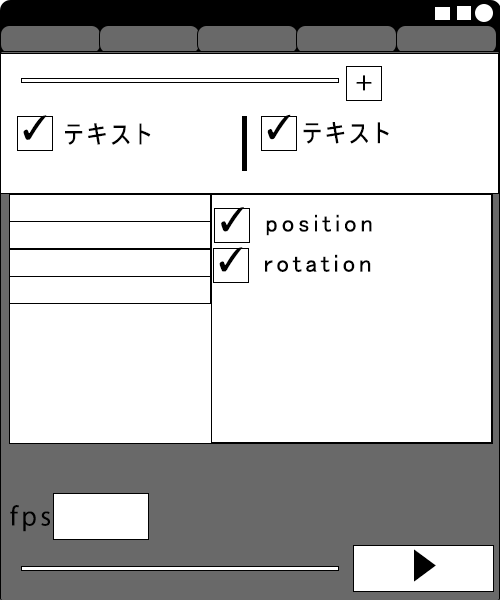
<style>
.page{position:relative;width:500px;height:600px;background:#ffffff}
.page>*{position:absolute;margin:0}
.t1{font:25px "MyriadPro-Regular";letter-spacing:0.15em;color:#000000}
.t2{font:33.3px "MS-UIGothic";letter-spacing:0.15em;color:#000000}
.t3{font:25px "MS-UIGothic";letter-spacing:0.15em;color:#000000}
.t4{font:33.1px "MS-UIGothic";letter-spacing:0.15em;color:#000000}
.t5{font:33.3px "KozGoPr6N-Regular";letter-spacing:0.15em;color:#000000}
</style>
<div class="page">
<p class="t1" style="left:356px;top:75px;width:16px;height:16px">+</p>
<p class="t2" style="left:23px;top:115px;width:24px;height:25px">✓</p>
<p class="t3" style="left:65px;top:123px;width:86px;height:22px">テキスト</p>
<p class="t4" style="left:267px;top:114px;width:24px;height:26px">✓</p>
<p class="t3" style="left:303px;top:122px;width:86px;height:22px">テキスト</p>
<p class="t4" style="left:221px;top:207px;width:23px;height:25px">✓</p>
<p class="t3" style="left:266px;top:214px;width:106px;height:22px">position</p>
<p class="t4" style="left:219px;top:247px;width:24px;height:25px">✓</p>
<p class="t3" style="left:265px;top:254px;width:106px;height:18px">rotation</p>
<p class="t1" style="left:10px;top:505px;width:40px;height:27px">fps</p>
<p class="t5" style="left:414px;top:549px;width:22px;height:33px">▶</p>
</div>
